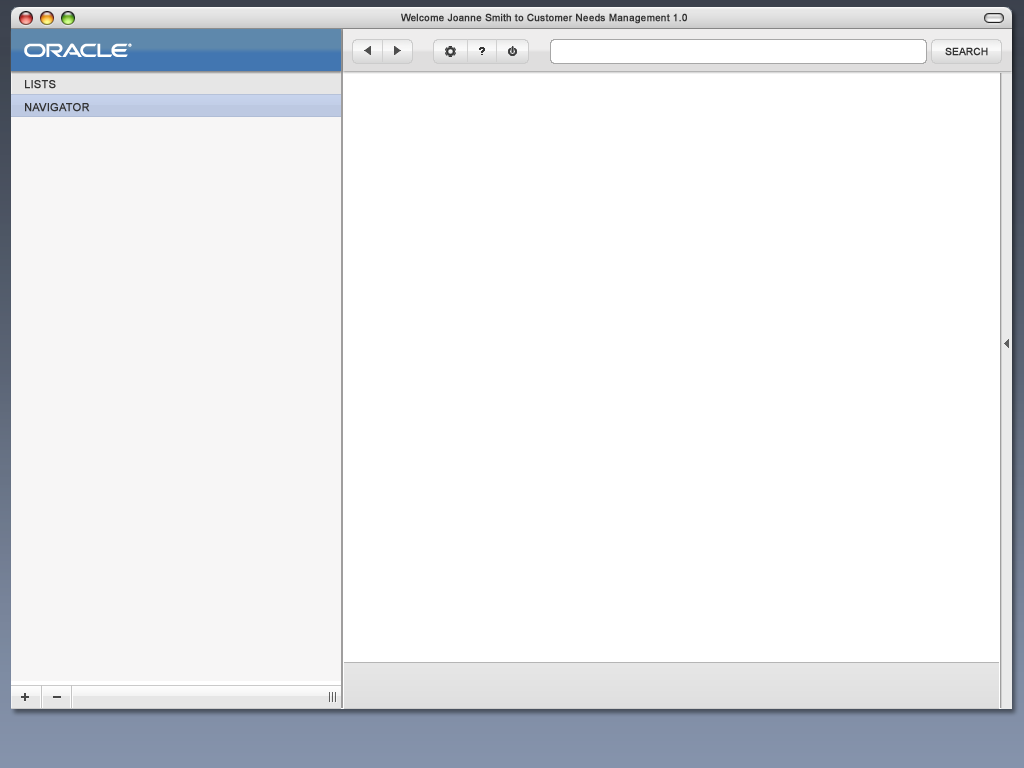
<style>
.page{position:relative;width:1024px;height:768px;background:#ffffff}
.page>*{position:absolute;margin:0}
.t1{font:10px "ArialMT";color:#333333;font-weight:bold}
.t2{font:11px "ArialMT";color:#333333;text-transform:uppercase;font-weight:bold}
</style>
<div class="page">
<p class="t1" style="left:401px;top:13px;width:286px;height:11px">Welcome Joanne Smith to Customer Needs Management 1.0</p>
<p class="t1" style="left:945px;top:47px;width:43px;height:9px">SEARCH</p>
<p class="t2" style="left:25px;top:80px;width:31px;height:9px">Lists</p>
<p class="t2" style="left:25px;top:103px;width:65px;height:9px">navigator</p>
</div>
